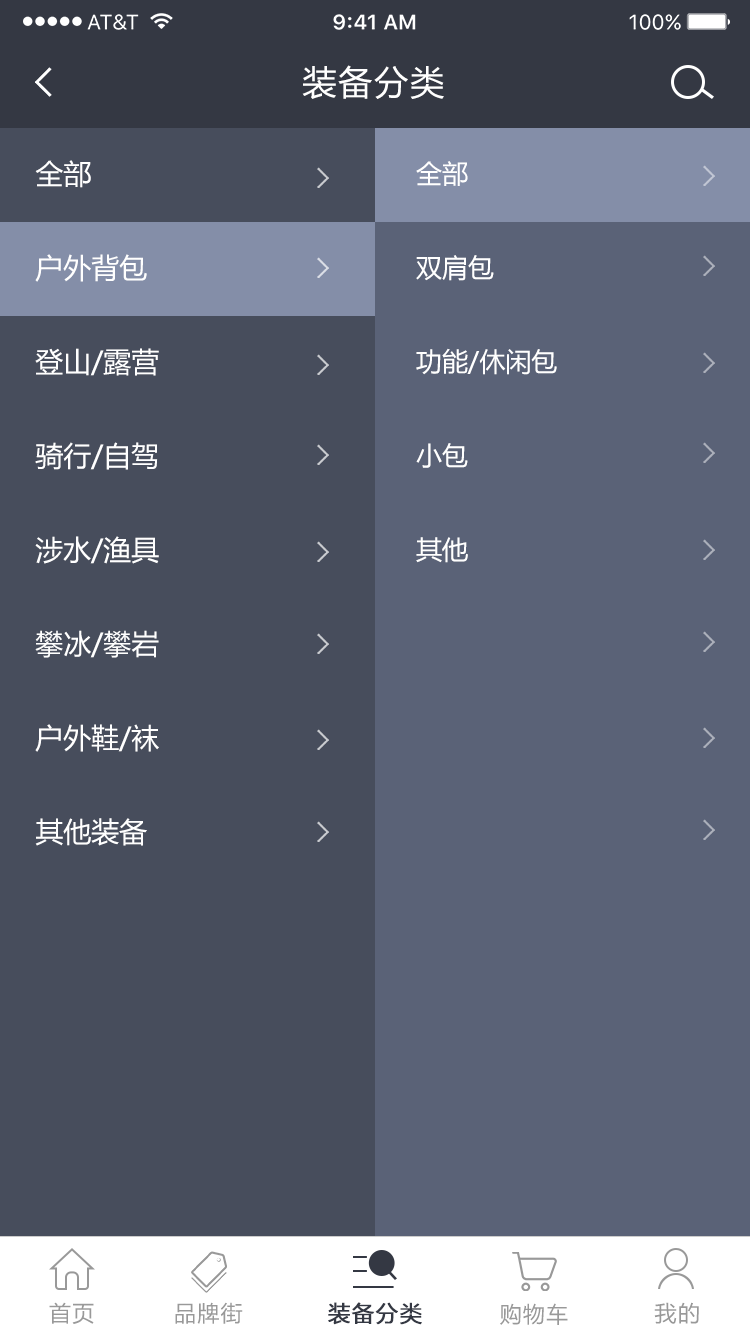
<style>
.page{position:relative;width:750px;height:1334px;background:#474d5c}
.page>*{position:absolute;margin:0}
.t1{font:34px "MicrosoftYaHei";letter-spacing:0.06em;color:#ffffff}
.t2{font:28px/47px "MicrosoftYaHei";color:#ffffff}
.t3{font:26px/47px "MicrosoftYaHei";color:#ffffff}
.t4{font:22px "MicrosoftYaHei";letter-spacing:0.06em;color:#999999}
.t5{font:22px "MicrosoftYaHei";letter-spacing:0.06em;color:#343843;font-weight:bold}
</style>
<div class="page">
<p class="t1" style="left:302px;top:65px;width:142px;height:34px">装备分类</p>
<p class="t2" style="left:35px;top:160px;width:124px;height:686px">全部<br><br>户外背包<br><br>登山/露营<br><br>骑行/自驾<br><br>涉水/渔具<br><br>攀冰/攀岩<br><br>户外鞋/袜<br><br>其他装备</p>
<p class="t3" style="left:416px;top:161px;width:141px;height:402px">全部<br><br>双肩包<br><br>功能/休闲包<br><br>小包<br><br>其他</p>
<p class="t4" style="left:49px;top:1302px;width:45px;height:22px">首页</p>
<p class="t4" style="left:175px;top:1302px;width:68px;height:22px">品牌街</p>
<p class="t5" style="left:328px;top:1302px;width:94px;height:23px">装备分类</p>
<p class="t4" style="left:654px;top:1302px;width:45px;height:22px">我的</p>
<p class="t4" style="left:500px;top:1303px;width:68px;height:22px">购物车</p>
</div>
